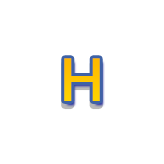
<style>
.page{position:relative;width:164px;height:164px;background:#ffffff}
.page>*{position:absolute;margin:0}
.t1{font:59.8px "PingFangHK-Semibold";color:#ffc500;text-transform:uppercase}
</style>
<div class="page">
<p class="t1" style="left:64px;top:58px;width:36px;height:43px">h</p>
</div>
